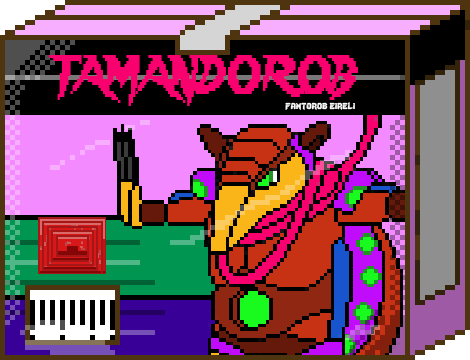
<style>
.page{position:relative;width:470px;height:360px}
.page>*{position:absolute;margin:0}
.t1{font:48px "Lady-Radical";color:#f9006f;scale:0.72 1}
.t2{font:12px "Lady-Radical";color:#fbfbfb}
</style>
<div class="page">
<p class="t1" style="left:49px;top:55px;width:309px;height:51px">TAMANDOROB</p>
<p class="t2" style="left:285px;top:102px;width:70px;height:8px">fantorob eireli</p>
</div>
